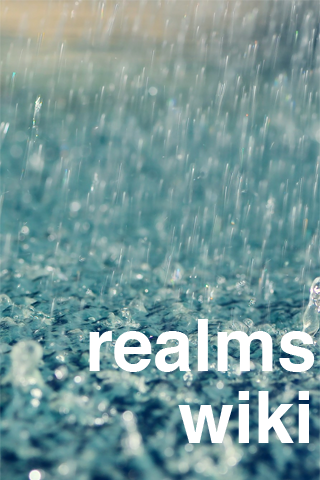
<style>
.page{position:relative;width:320px;height:480px}
.page>*{position:absolute;margin:0}
.t1{font:72px "Helvetica-Bold";color:#ffffff}
</style>
<div class="page">
<p class="t1" style="left:89px;top:319px;width:226px;height:53px">realms</p>
<p class="t1" style="left:178px;top:391px;width:131px;height:52px">wiki</p>
</div>
